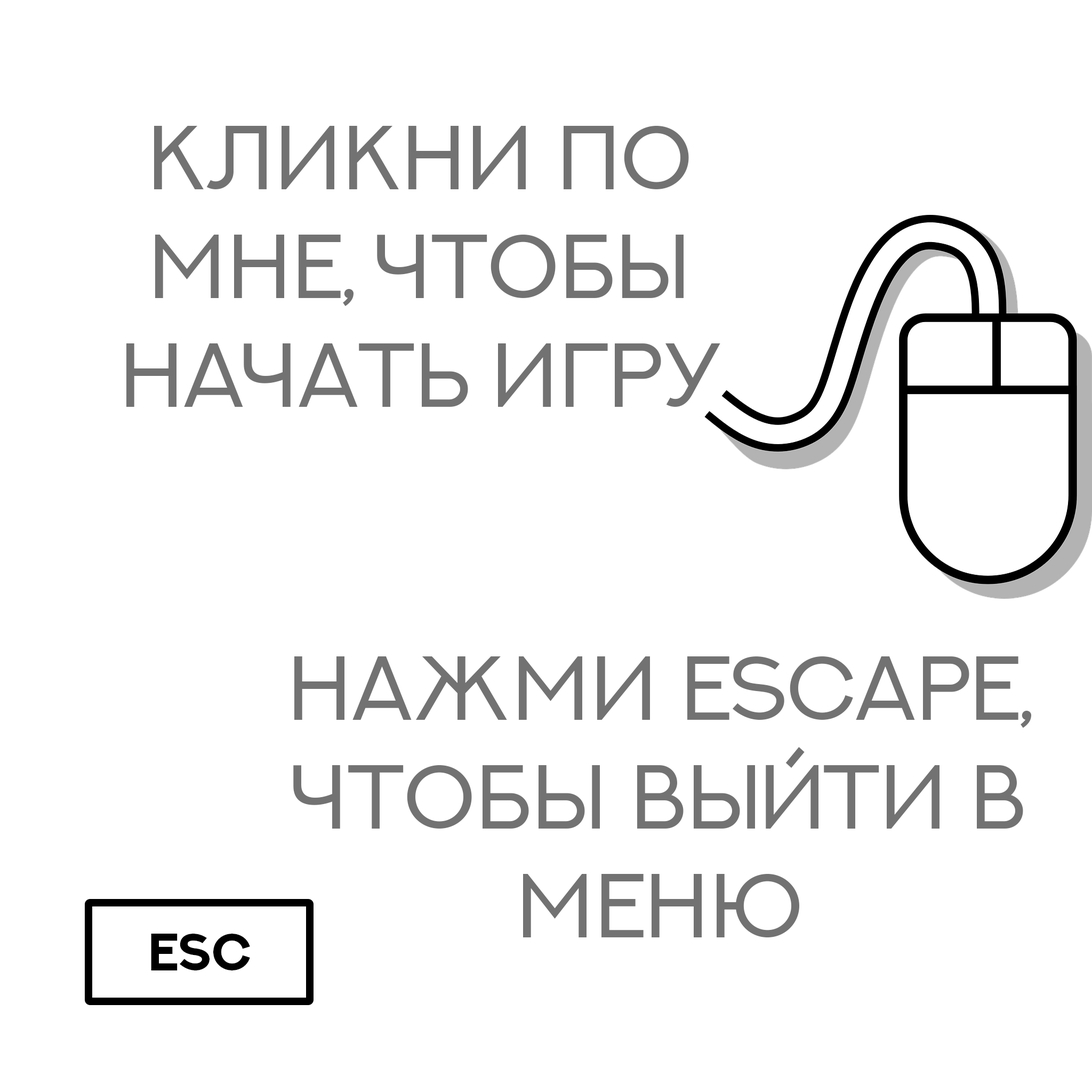
<style>
.page{position:relative;width:1092px;height:1092px;background:#ffffff}
.page>*{position:absolute;margin:0}
.t1{font:90.6px "NEXTART-Regular";color:#727272}
.t2{font:52.7px "NEXTART-Bold";color:#000000}
.t3{font:11.7px "NEXTART-Bold";color:#000000}
</style>
<div class="page">
<p class="t1" style="left:126px;top:126px;width:594px;height:281px;text-align:center">Кликни по мне, чтобы начать игру</p>
<p class="t1" style="left:293px;top:656px;width:738px;height:281px;text-align:center">нажми escape, чтобы выйти в меню</p>
<p class="t2" style="left:151px;top:934px;width:99px;height:36px"><span class="t3"> <br></span>esc</p>
</div>
